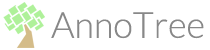
<style>
.page{position:relative;width:210px;height:50px;background:#ffffff}
.page>*{position:absolute;margin:0}
.t1{font:36px "Lato-Light";color:#888888}
</style>
<div class="page">
<p class="t1" style="left:51px;top:12px;width:153px;height:27px">AnnoTree</p>
</div>
